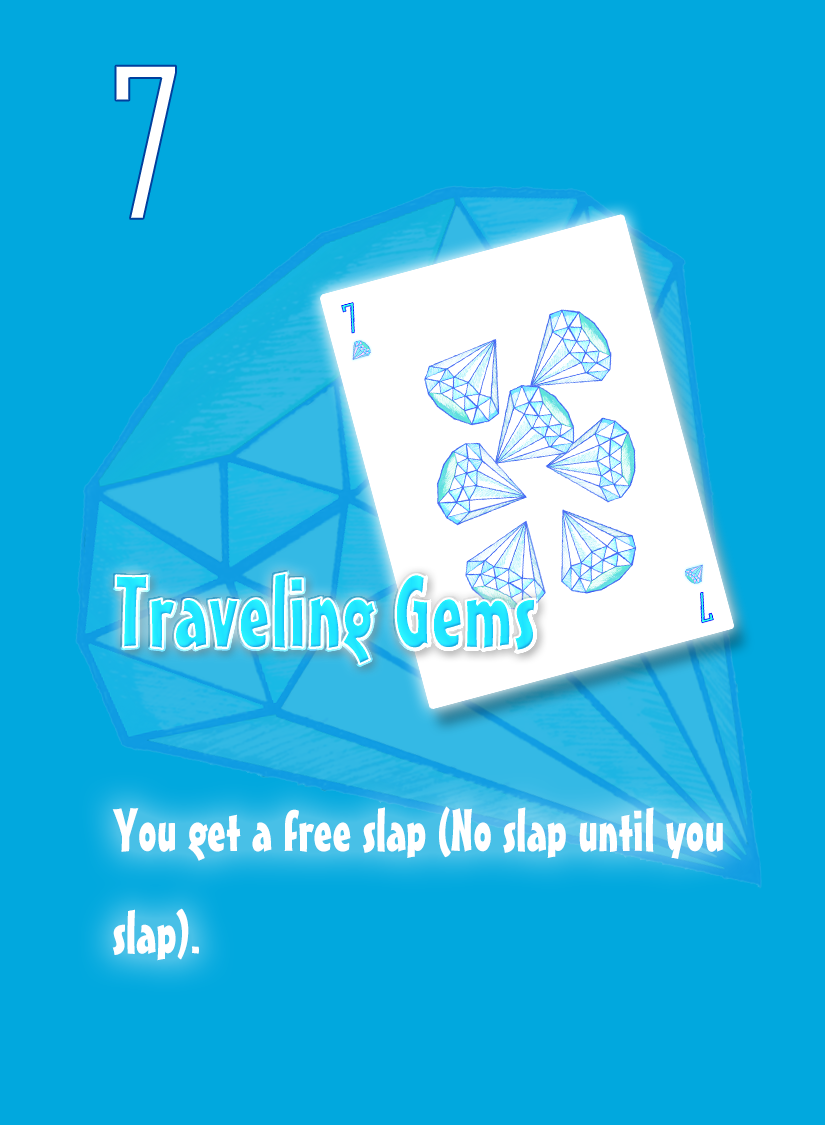
<style>
.page{position:relative;width:825px;height:1125px;background:#01a8de}
.page>*{position:absolute;margin:0}
.t1{font:200px "AgencyFB-Reg";color:#ffffff}
.t2{font:100px "MisterEarlBT-Regular";color:#22e7ff}
.t3{font:58.3px "MisterEarlBT-Regular";color:#ffffff}
</style>
<div class="page">
<p class="t1" style="left:115px;top:65px;width:61px;height:154px">7</p>
<p class="t2" style="left:115px;top:572px;width:420px;height:92px">Traveling Gems</p>
<p class="t3" style="left:112px;top:806px;width:611px;height:155px">You get a free slap (No slap until you <br>slap).</p>
</div>
